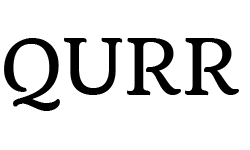
<style>
.page{position:relative;width:250px;height:150px;background:#ffffff}
.page>*{position:absolute;margin:0}
.t1{font:75px "Quando-Regular";color:#000000;text-transform:uppercase}
</style>
<div class="page">
<p class="t1" style="left:4px;top:37px;width:235px;height:74px">QURR</p>
</div>
